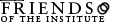
<style>
.page{position:relative;width:120px;height:24px;background:#ffffff}
.page>*{position:absolute;margin:0}
.t1{font:8.3px/8.3px "MiaSabon-Roman";letter-spacing:0.2em;color:#000000}
.t2{font:16.7px "MiaSabon-Roman";letter-spacing:0.2em;color:#000000}
</style>
<div class="page">
<p class="t1" style="left:1px;top:2px;width:104px;height:20px"><span class="t2">FRIENDS<br></span>OF THE INSTITUTE</p>
</div>
